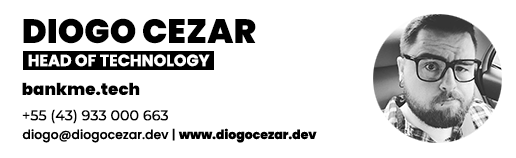
<style>
.page{position:relative;width:516px;height:158px;background:#ffffff}
.page>*{position:absolute;margin:0}
.t1{font:33.7px "Poppins-Black";color:#000000}
.t2{font:16px "Poppins-Bold";color:#ffffff;text-transform:uppercase}
.t3{font:16.7px "Poppins-Black";color:#000000}
.t4{font:14.2px "Montserrat-Medium";color:#000000}
</style>
<div class="page">
<p class="t1" style="left:23px;top:18px;width:233px;height:26px">DIOGO CEZAR</p>
<p class="t2" style="left:28px;top:54px;width:182px;height:13px">HEAD OF TECHNOLOGY</p>
<p class="t3" style="left:22px;top:82px;width:118px;height:14px">bankme.tech</p>
<p class="t4" style="left:22px;top:109px;width:146px;height:15px">+55 (43) 933 000 663</p>
</div>
